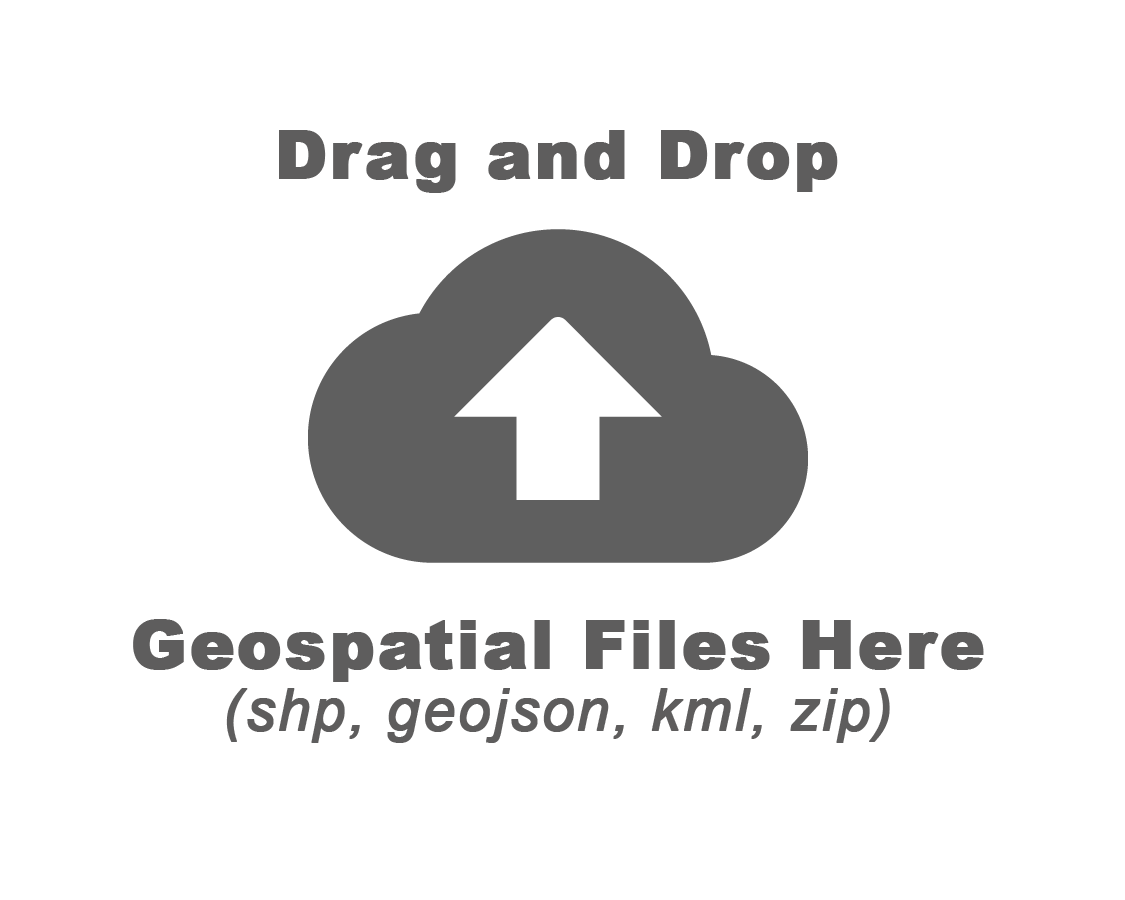
<style>
.page{position:relative;width:1125px;height:900px;background:#ffffff}
.page>*{position:absolute;margin:0}
.t1{font:66.7px "Arial-Black";letter-spacing:0.025em;color:#5e5d5d;font-weight:bold}
.t2{font:58.3px "Arial-ItalicMT";letter-spacing:0.025em;color:#5e5d5d;font-weight:bold}
</style>
<div class="page">
<p class="t1" style="left:279px;top:130px;width:559px;height:63px">Drag and Drop</p>
<p class="t1" style="left:133px;top:619px;width:851px;height:63px">Geospatial Files Here</p>
<p class="t2" style="left:226px;top:688px;width:664px;height:55px">(shp, geojson, kml, zip)</p>
</div>
